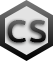
<style>
.page{position:relative;width:53px;height:61px;background:#ffffff}
.page>*{position:absolute;margin:0}
.t1{font:32px "Ubuntu";letter-spacing:0.05em;font-weight:bold}
</style>
<div class="page">
<p class="t1" style="left:7px;top:20px;width:39px;height:23px">CS</p>
</div>
